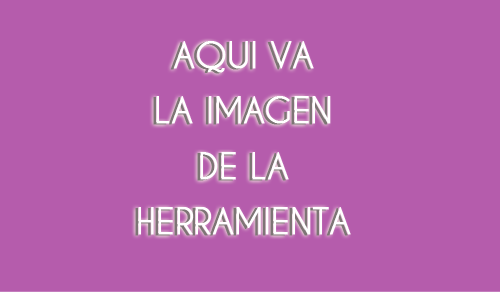
<style>
.page{position:relative;width:500px;height:293px;background:#b55cac}
.page>*{position:absolute;margin:0}
.t1{font:33.7px/7.9px "CaviarDreams";color:#ffffff;font-weight:bold}
</style>
<div class="page">
<p class="t1" style="left:138px;top:41px;width:213px;height:194px;text-align:center">AQUI VA<br><br><br><br><br><br><br>LA IMAGEN <br><br><br><br><br><br><br>DE LA<br><br><br><br><br><br> <br>HERRAMIENTA</p>
</div>
